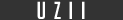
<style>
.page{position:relative;width:123px;height:20px;background:#333333}
.page>*{position:absolute;margin:0}
.t1{font:24px "BigNoodleTitling";color:#ffffff}
</style>
<div class="page">
<p class="t1" style="left:37px;top:1px;width:48px;height:18px">u  z  i  i</p>
</div>
